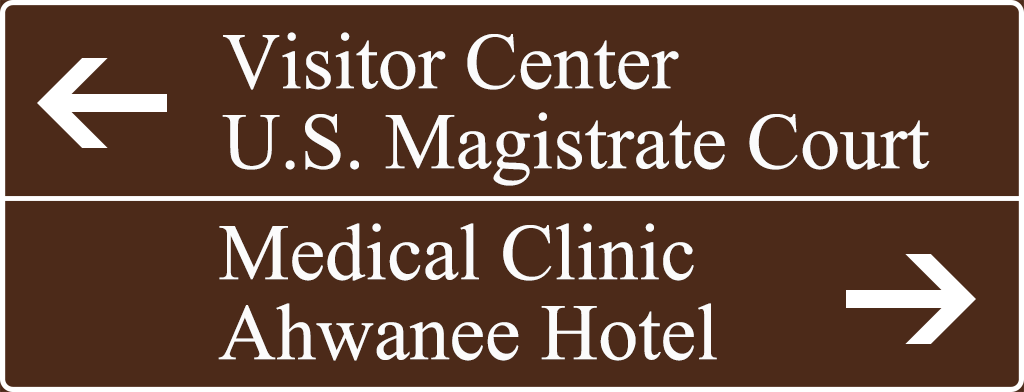
<style>
.page{position:relative;width:1024px;height:392px;background:#4c2a19}
.page>*{position:absolute;margin:0}
.t1{font:80px/80px "IskoolaPota";color:#fbfbfb}
</style>
<div class="page">
<p class="t1" style="left:222px;top:32px;width:708px;height:154px">Visitor Center<br>U.S. Magistrate Court</p>
<p class="t1" style="left:218px;top:223px;width:499px;height:138px">Medical Clinic<br>Ahwanee Hotel</p>
</div>
